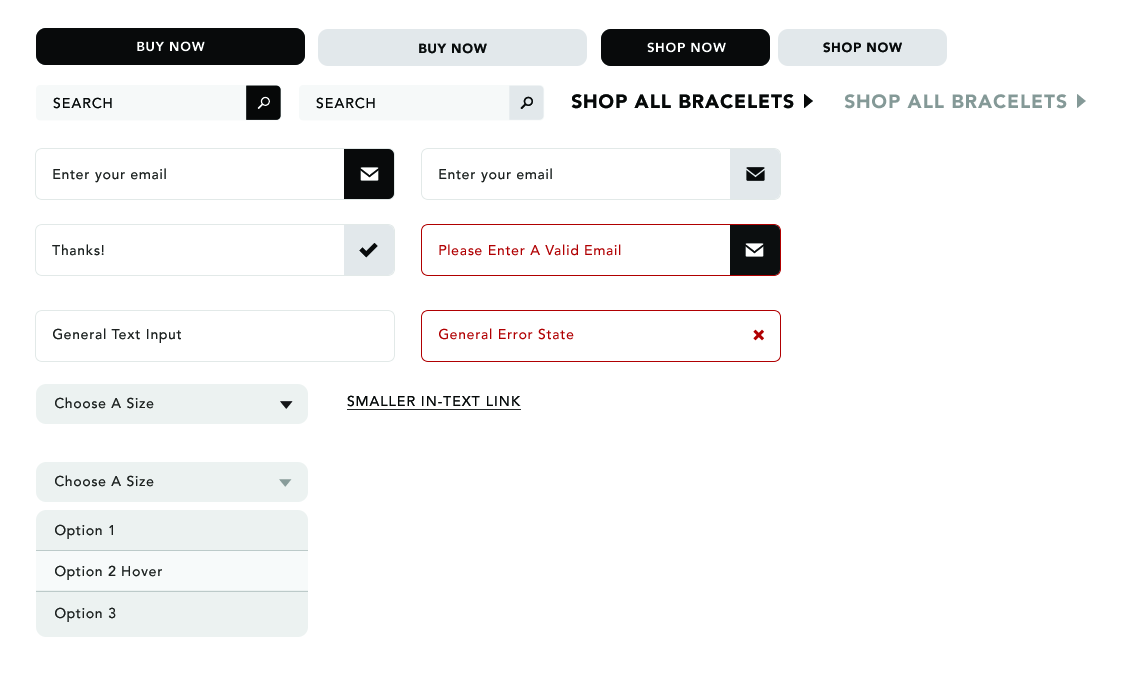
<style>
.page{position:relative;width:1125px;height:685px;background:#ffffff}
.page>*{position:absolute;margin:0}
.t1{font:13px "Avenir-Black";letter-spacing:0.05em;color:#ffffff}
.t2{font:13px "Avenir-Black";letter-spacing:0.05em;color:#090c0c}
.t3{font:13px "Avenir-Black";letter-spacing:0.05em;color:#080a0b}
.t4{font:14px "Avenir-Medium";letter-spacing:0.07em;color:#060808;text-transform:uppercase}
.t5{font:12.3px "SSStandard";letter-spacing:0.05em;color:#ffffff}
.t6{font:12.3px "SSStandard";letter-spacing:0.05em;color:#080a0b}
.t7{font:19px "Avenir-Black";letter-spacing:0.05em;color:#060808;text-transform:uppercase}
.t8{font:14px "SSStandard";color:#060808}
.t9{font:19px "Avenir-Black";letter-spacing:0.05em;color:#849897;text-transform:uppercase}
.t10{font:14px "SSStandard";color:#849897}
.t11{font:14px "Avenir-Medium";letter-spacing:0.05em;color:#1d2120}
.t12{font:18px "SSStandard";letter-spacing:0.05em;color:#ffffff}
.t13{font:18px "SSStandard";letter-spacing:0.05em;color:#080a0b}
.t14{font:14px "Avenir-Medium";letter-spacing:0.05em;color:#b00002}
.t15{font:12px "SSStandard";color:#b00002}
.t16{font:12px "SSStandard";color:#141618}
.t17{font:14px "Avenir-Medium";letter-spacing:0.07em;color:#060808;text-transform:uppercase;text-decoration:underline}
.t18{font:12px "SSStandard";color:#889c9a}
</style>
<div class="page">
<p class="t1" style="left:137px;top:41px;width:68px;height:11px">BUY NOW</p>
<p class="t2" style="left:419px;top:43px;width:68px;height:11px">BUY NOW</p>
<p class="t1" style="left:647px;top:42px;width:79px;height:11px">SHOP NOW</p>
<p class="t3" style="left:823px;top:42px;width:79px;height:11px">SHOP NOW</p>
<p class="t4" style="left:53px;top:97px;width:59px;height:12px">Search</p>
<p class="t5" style="left:257px;top:96px;width:13px;height:13px">Search</p>
<p class="t4" style="left:316px;top:97px;width:59px;height:12px">Search</p>
<p class="t6" style="left:520px;top:96px;width:13px;height:13px">Search</p>
<p class="t7" style="left:571px;top:94px;width:242px;height:15px">Shop all Bracelets <span class="t8">▹</span></p>
<p class="t9" style="left:844px;top:94px;width:242px;height:15px">Shop all Bracelets <span class="t10">▹</span></p>
<p class="t11" style="left:53px;top:168px;width:113px;height:15px">Enter your email</p>
<p class="t12" style="left:360px;top:167px;width:19px;height:14px">mail</p>
<p class="t11" style="left:439px;top:168px;width:113px;height:15px">Enter your email</p>
<p class="t13" style="left:746px;top:167px;width:19px;height:14px">mail</p>
<p class="t11" style="left:52px;top:244px;width:52px;height:12px">Thanks!</p>
<p class="t13" style="left:359px;top:243px;width:19px;height:15px">check</p>
<p class="t14" style="left:439px;top:244px;width:182px;height:12px">Please Enter A Valid Email</p>
<p class="t12" style="left:745px;top:243px;width:19px;height:14px">mail</p>
<p class="t11" style="left:53px;top:328px;width:128px;height:15px">General Text Input</p>
<p class="t14" style="left:439px;top:328px;width:135px;height:12px">General Error State</p>
<p class="t15" style="left:753px;top:329px;width:11px;height:12px">␡</p>
<p class="t11" style="left:55px;top:397px;width:99px;height:12px">Choose A Size</p>
<p class="t16" style="left:280px;top:401px;width:13px;height:8px">▾</p>
<p class="t17" style="left:347px;top:395px;width:174px;height:15px">SMaller in-text link</p>
<p class="t11" style="left:55px;top:475px;width:99px;height:12px">Choose A Size</p>
<p class="t18" style="left:279px;top:479px;width:13px;height:8px">▾</p>
<p class="t11" style="left:55px;top:524px;width:58px;height:15px">Option 1</p>
<p class="t11" style="left:55px;top:565px;width:107px;height:15px">Option 2 Hover</p>
<p class="t11" style="left:55px;top:607px;width:61px;height:15px">Option 3</p>
</div>
